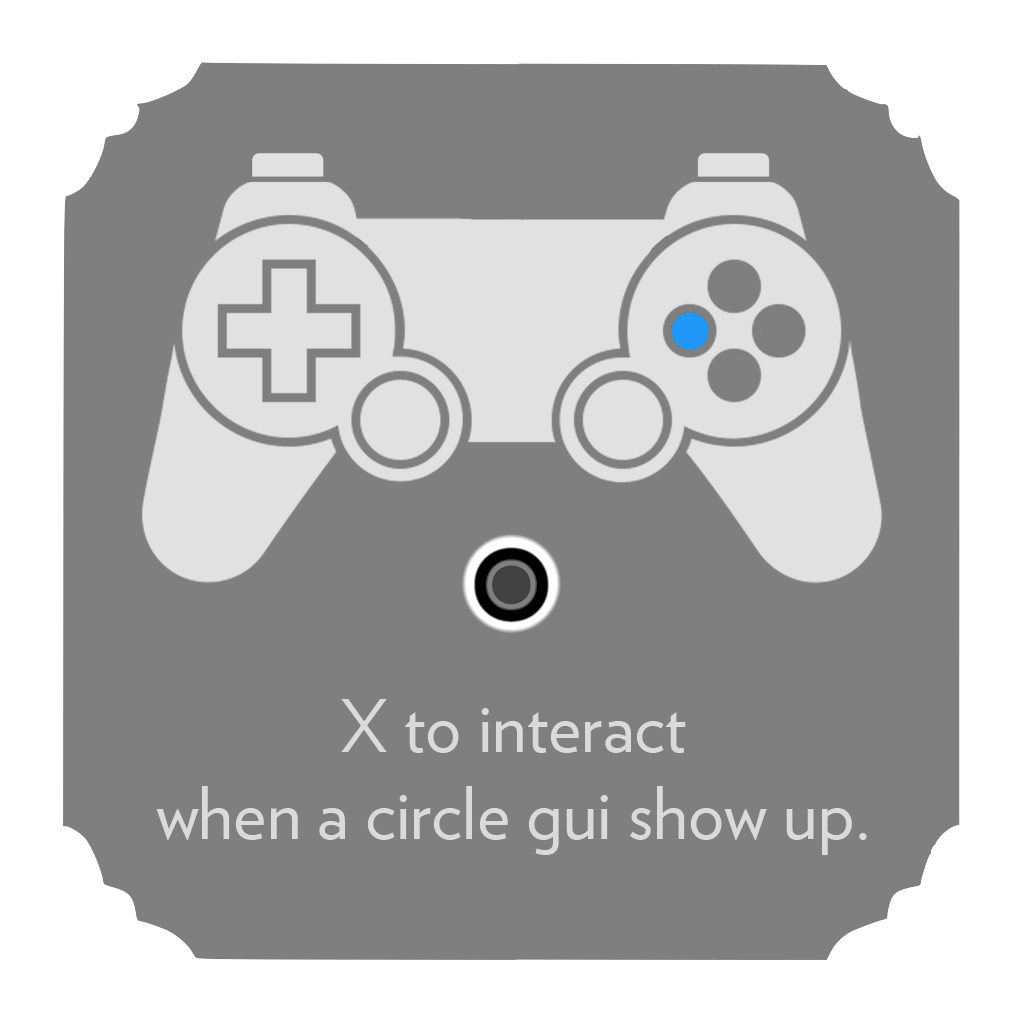
<style>
.page{position:relative;width:1024px;height:1024px;background:#7f7f7f}
.page>*{position:absolute;margin:0}
.t1{font:72px "Verlag-Book";color:#dadada}
</style>
<div class="page">
<p class="t1" style="left:156px;top:699px;width:711px;height:156px;text-align:center">X to interact<br>when a circle gui show up.</p>
</div>
